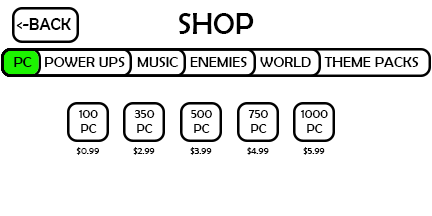
<style>
.page{position:relative;width:432px;height:216px;background:#ffffff}
.page>*{position:absolute;margin:0}
.t1{font:30px "BerlinSansFB-Reg";color:#000000}
.t2{font:17px "BerlinSansFB-Reg";color:#000000}
.t3{font:15px "BerlinSansFB-Reg";color:#000000}
.t4{font:13px "BerlinSansFB-Reg";color:#000000}
.t5{font:10px "BerlinSansFB-Reg";color:#000000}
</style>
<div class="page">
<p class="t1" style="left:179px;top:13px;width:75px;height:21px">SHOP</p>
<p class="t2" style="left:16px;top:18px;width:55px;height:12px">&lt;-BACK</p>
<p class="t3" style="left:14px;top:57px;width:18px;height:10px">PC</p>
<p class="t3" style="left:45px;top:57px;width:80px;height:10px">POWER UPS</p>
<p class="t3" style="left:137px;top:57px;width:42px;height:10px">MUSIC</p>
<p class="t3" style="left:190px;top:56px;width:57px;height:11px">ENEMIES</p>
<p class="t3" style="left:260px;top:57px;width:51px;height:10px">WORLD</p>
<p class="t3" style="left:324px;top:57px;width:95px;height:10px">THEME PACKS</p>
<p class="t4" style="left:79px;top:110px;width:19px;height:23px;text-align:center">100<br>PC</p>
<p class="t4" style="left:134px;top:110px;width:21px;height:23px;text-align:center">350<br>PC</p>
<p class="t4" style="left:191px;top:110px;width:21px;height:23px;text-align:center">500<br>PC</p>
<p class="t4" style="left:248px;top:110px;width:20px;height:23px;text-align:center">750<br>PC</p>
<p class="t4" style="left:301px;top:110px;width:27px;height:23px;text-align:center">1000<br>PC</p>
<p class="t5" style="left:76px;top:147px;width:23px;height:8px">$0.99</p>
<p class="t5" style="left:133px;top:147px;width:22px;height:8px">$2.99</p>
<p class="t5" style="left:190px;top:147px;width:22px;height:8px">$3.99</p>
<p class="t5" style="left:247px;top:147px;width:22px;height:8px">$4.99</p>
<p class="t5" style="left:303px;top:147px;width:22px;height:8px">$5.99</p>
</div>
